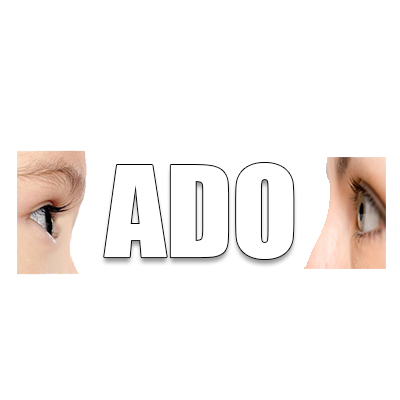
<style>
.page{position:relative;width:400px;height:400px;background:#ffffff}
.page>*{position:absolute;margin:0}
.t1{font:117.4px "Impact";color:#ffffff}
</style>
<div class="page">
<p class="t1" style="left:104px;top:163px;width:190px;height:96px">ADO</p>
</div>
